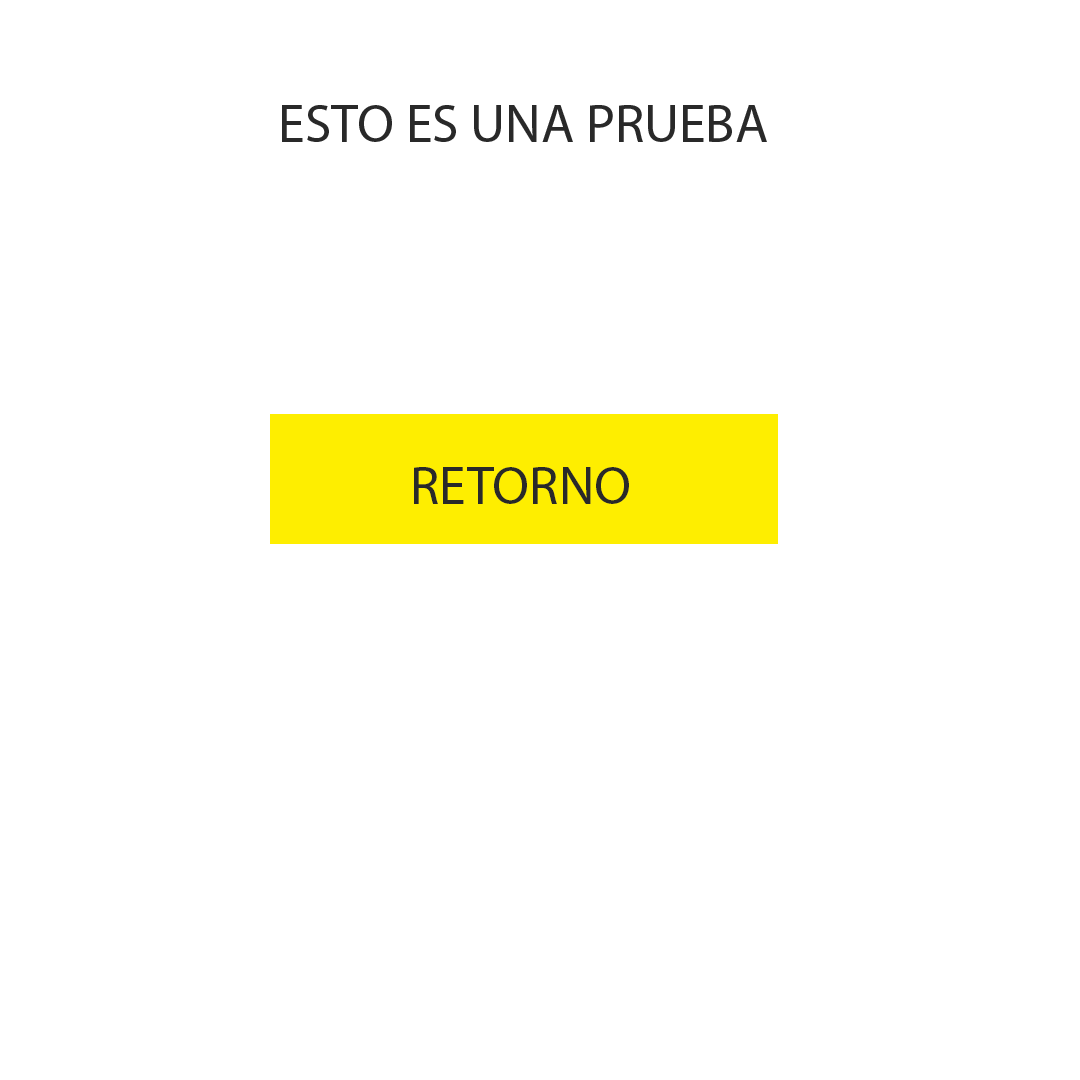
<style>
.page{position:relative;width:1080px;height:1080px;background:#ffffff}
.page>*{position:absolute;margin:0}
.t1{font:54.2px "MyriadPro-Regular";color:#292929}
</style>
<div class="page">
<p class="t1" style="left:282px;top:105px;width:485px;height:37px">ESTO ES UNA PRUEBA</p>
<p class="t1" style="left:414px;top:467px;width:215px;height:37px">RETORNO</p>
</div>
